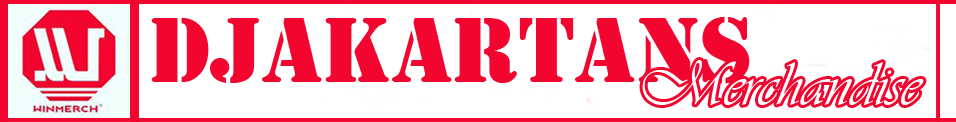
<style>
.page{position:relative;width:956px;height:122px;background:#ffffff}
.page>*{position:absolute;margin:0}
.t1{font:96px "Stencil";color:#f2052f}
.t2{font:64px "Vivaldii";color:#ffffff}
</style>
<div class="page">
<p class="t1" style="left:151px;top:16px;width:599px;height:68px">DJAKARTANS</p>
<p class="t2" style="left:642px;top:60px;width:282px;height:46px">Merchandise</p>
</div>
